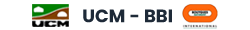
<style>
.page{position:relative;width:250px;height:30px;background:#ffffff}
.page>*{position:absolute;margin:0}
.t1{font:18px "Poppins-Bold";color:#1e2a38}
</style>
<div class="page">
<p class="t1" style="left:83px;top:9px;width:89px;height:14px">UCM - BBI</p>
</div>
